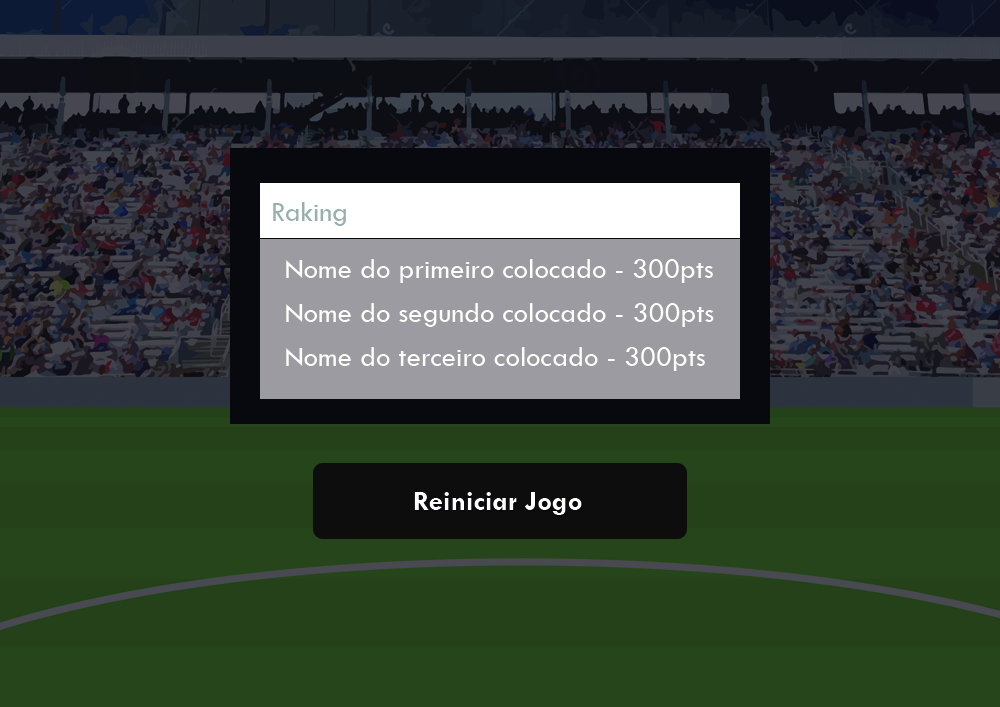
<style>
.page{position:relative;width:1000px;height:707px}
.page>*{position:absolute;margin:0}
.t1{font:29px "TwCenMT-Regular";color:#97afad}
.t2{font:29px "TwCenMT-Regular";color:#fefffa}
.t3{font:29px "TwCenMT-Bold";color:#ffffff}
</style>
<div class="page">
<p class="t1" style="left:273px;top:202px;width:73px;height:24px">Raking</p>
<p class="t2" style="left:286px;top:259px;width:427px;height:24px">Nome do primeiro colocado - 300pts</p>
<p class="t2" style="left:286px;top:303px;width:428px;height:24px">Nome do segundo colocado - 300pts</p>
<p class="t2" style="left:286px;top:347px;width:419px;height:24px">Nome do terceiro colocado - 300pts</p>
<p class="t3" style="left:414px;top:492px;width:168px;height:23px">Reiniciar Jogo</p>
</div>
